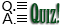
<style>
.page{position:relative;width:62px;height:25px;background:#ffffff}
.page>*{position:absolute;margin:0}
.t1{font:15.4px "Candara";color:#000000;font-variant:small-caps}
.t2{font:27.2px "BirchStd";color:#014c16;font-variant:small-caps}
.t3{font:15.4px "ArialMT";color:#000000;font-variant:small-caps}
</style>
<div class="page">
<p class="t1" style="left:2px;top:1px;width:14px;height:13px">Q.</p>
<p class="t2" style="left:31px;top:3px;width:29px;height:20px">Quiz!</p>
<p class="t3" style="left:2px;top:13px;width:14px;height:11px">A.</p>
</div>
